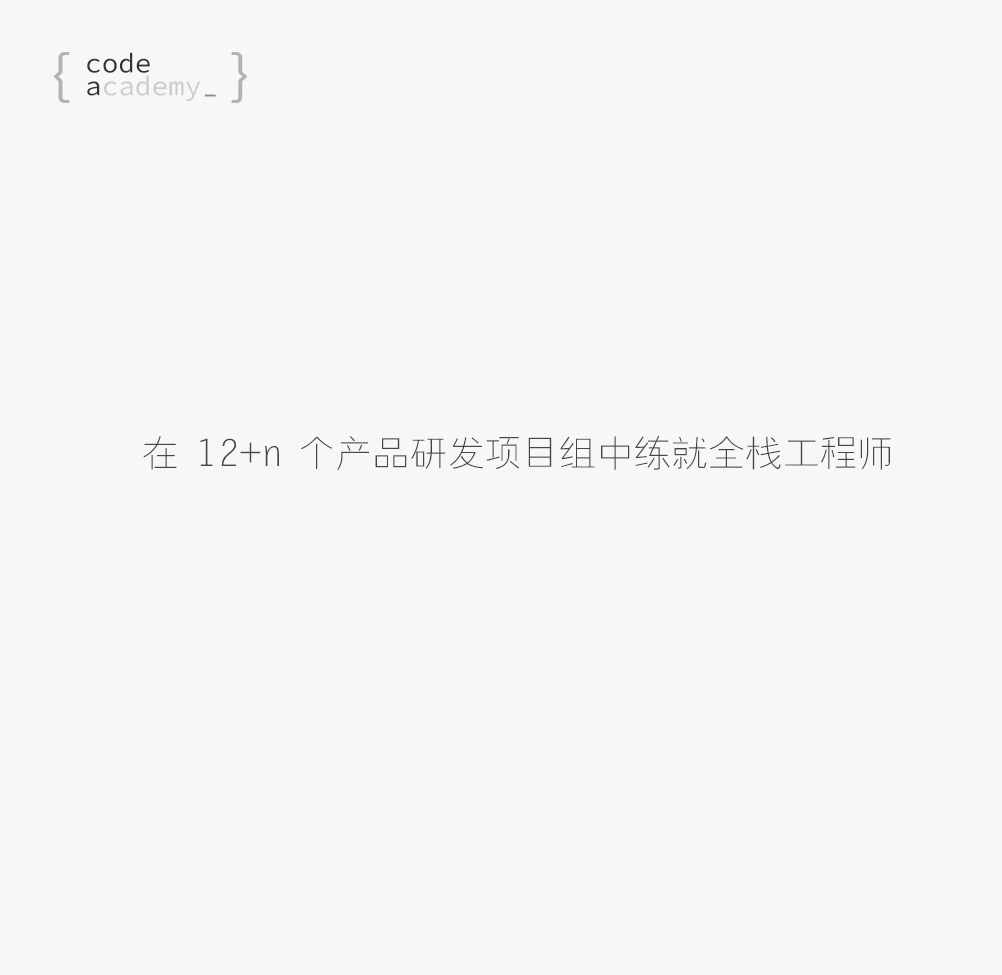
<style>
.page{position:relative;width:1002px;height:975px;background:#f7f7f7}
.page>*{position:absolute;margin:0}
.t1{font:58.5px "AgencyFB-Reg";color:#b3b3b3}
.t2{font:27.7px/22.7px "SourceCodePro-Regular";color:#333333}
.t3{font:27.7px/22.7px "SourceCodePro-Regular";color:#cccccc}
.t4{font:27.7px "SourceCodePro-Regular";color:#909090;scale:0.83 1}
.t5{font:37.3px "FZYXJW--GB1-0";color:#454545}
</style>
<div class="page">
<p class="t1" style="left:53px;top:52px;width:17px;height:51px">{</p>
<p class="t2" style="left:87px;top:52px;width:113px;height:49px">code<br>a<span class="t3">cademy</span></p>
<p class="t1" style="left:231px;top:52px;width:16px;height:51px">}</p>
<p class="t4" style="left:204px;top:94px;width:12px;height:3px">_</p>
<p class="t5" style="left:143px;top:436px;width:748px;height:34px">在 12+n 个产品研发项目组中练就全栈工程师</p>
</div>
